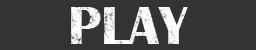
<style>
.page{position:relative;width:256px;height:50px;background:#333333}
.page>*{position:absolute;margin:0}
.t1{font:55.4px "BritannicBold";color:#ffffff}
</style>
<div class="page">
<p class="t1" style="left:71px;top:7px;width:117px;height:37px">PLAY</p>
</div>
